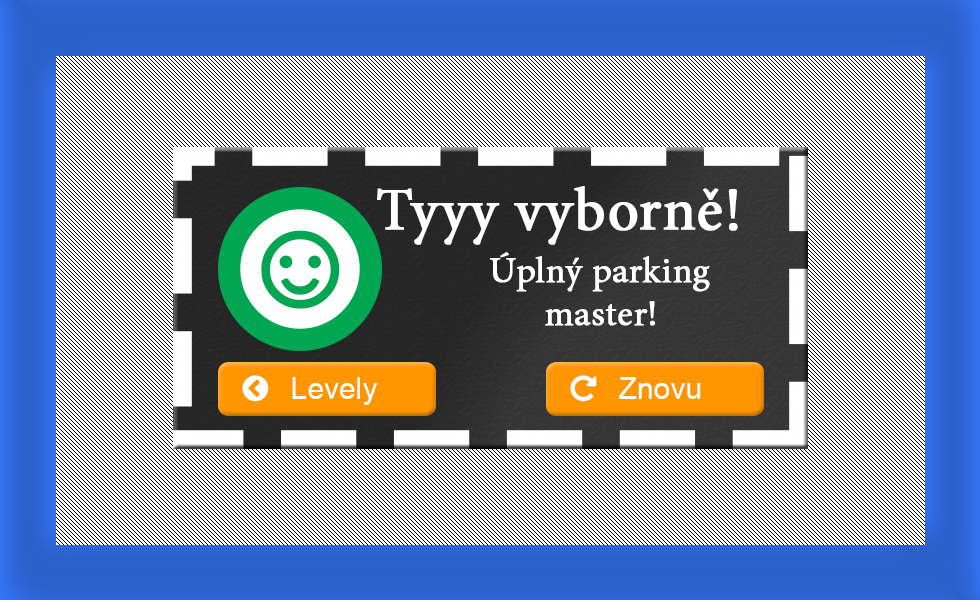
<style>
.page{position:relative;width:980px;height:600px;background:#ffffff}
.page>*{position:absolute;margin:0}
.t1{font:60px "MinionPro-Regular";color:#ffffff;font-weight:bold}
.t2{font:120px "ArialMT";color:#00a651;font-weight:bold}
.t3{font:36px "MinionPro-Regular";color:#ffffff;font-weight:bold}
</style>
<div class="page">
<p class="t1" style="left:377px;top:186px;width:361px;height:59px">Tyyy vyborně!</p>
<p class="t2" style="left:261px;top:230px;width:79px;height:79px">☺</p>
<p class="t3" style="left:490px;top:252px;width:220px;height:74px">Úplný parking <br>     master!</p>
</div>
